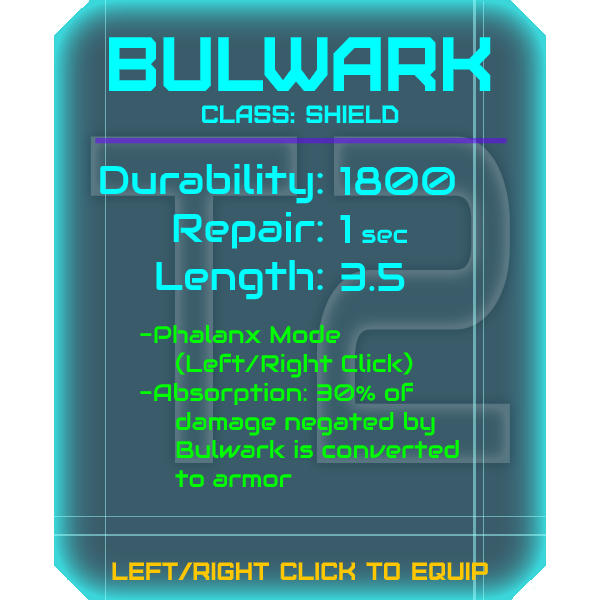
<style>
.page{position:relative;width:600px;height:600px;background:#3a5c6a}
.page>*{position:absolute;margin:0}
.t1{font:76.8px "Furore";color:#00ffff}
.t2{font:25px "Furore";color:#00ffff}
.t3{font:40px "Audiowide-Regular";color:#00ffff}
.t4{font:25px "Audiowide-Regular";color:#00ffff}
.t5{font:24px "Audiowide-Regular";color:#00ff00}
.t6{font:25px "Furore";color:#ffc700}
</style>
<div class="page">
<p class="t1" style="left:109px;top:37px;width:382px;height:54px">bulwark</p>
<p class="t2" style="left:202px;top:105px;width:197px;height:18px">Class: shield</p>
<p class="t3" style="left:100px;top:163px;width:223px;height:137px;text-align:right">Durability:<br>Repair:<br>Length:</p>
<p class="t3" style="left:340px;top:166px;width:115px;height:125px">1800<br>1 <span class="t4">sec<br></span>3.5</p>
<p class="t5" style="left:140px;top:324px;width:319px;height:163px">-Phalanx Mode<br> (Left/Right Click)<br>-Absorption: 30% of<br> damage negated by<br> Bulwark is converted<br> to armor</p>
<p class="t6" style="left:112px;top:562px;width:376px;height:18px">left/right click to equip</p>
</div>
